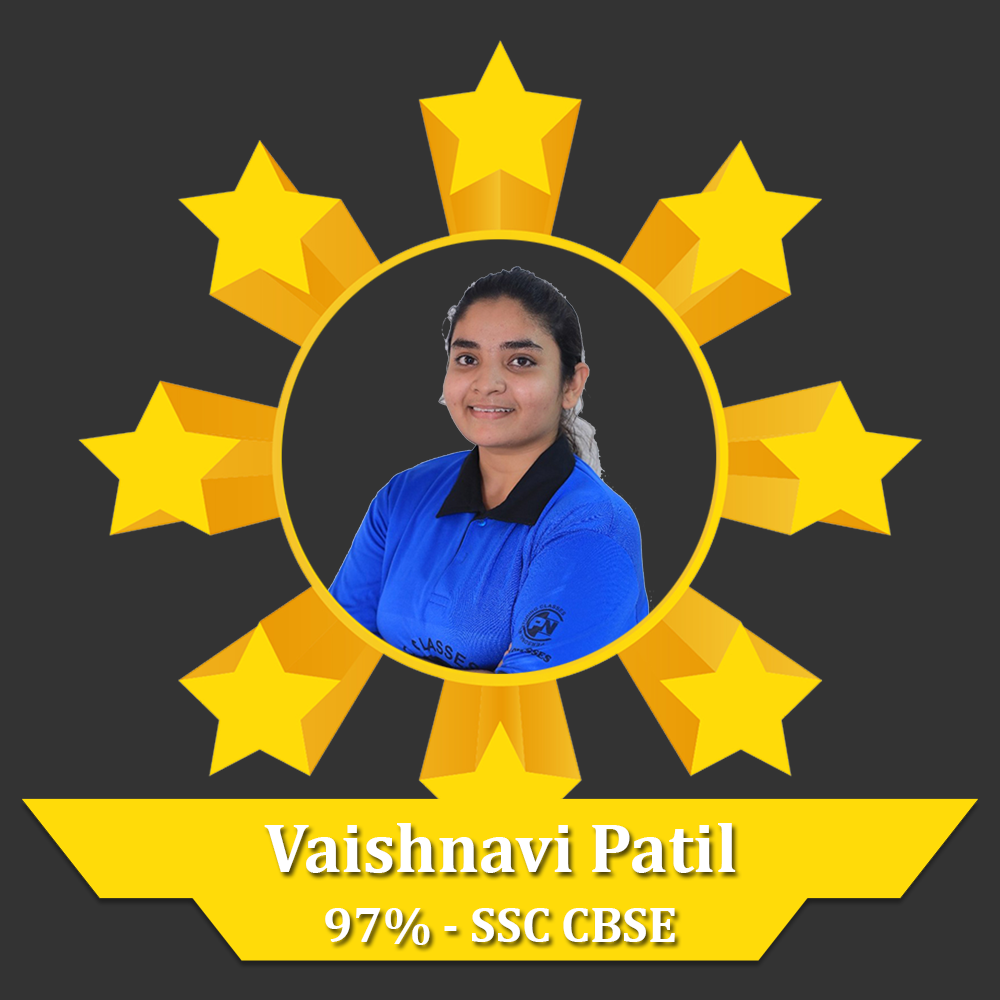
<style>
.page{position:relative;width:1000px;height:1000px;background:#333333}
.page>*{position:absolute;margin:0}
.t1{font:70px "Cambria-Bold";color:#ffffff}
.t2{font:50px "Cambria-Bold";color:#ffffff}
</style>
<div class="page">
<p class="t1" style="left:264px;top:823px;width:472px;height:50px">Vaishnavi Patil</p>
<p class="t2" style="left:325px;top:908px;width:350px;height:37px">97% - SSC CBSE</p>
</div>
